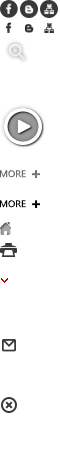
<style>
.page{position:relative;width:60px;height:450px;background:#ffffff}
.page>*{position:absolute;margin:0}
.t1{font:9.5px "SegoeUI";color:#6a6a6a}
.t2{font:9.5px "SegoeUI";color:#000000}
</style>
<div class="page">
<p class="t1" style="left:0px;top:170px;width:26px;height:8px">MORE</p>
<p class="t2" style="left:0px;top:200px;width:26px;height:8px">MORE</p>
</div>
